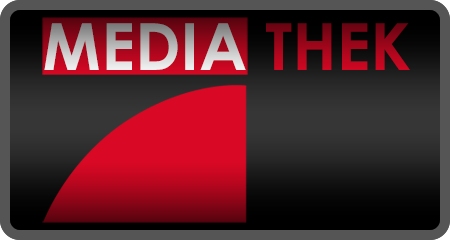
<style>
.page{position:relative;width:450px;height:240px}
.page>*{position:absolute;margin:0}
.t1{font:65px "CenturyGothic-Bold"}
</style>
<div class="page">
<p class="t1" style="left:44px;top:23px;width:366px;height:47px">MEDIA THEK</p>
</div>
